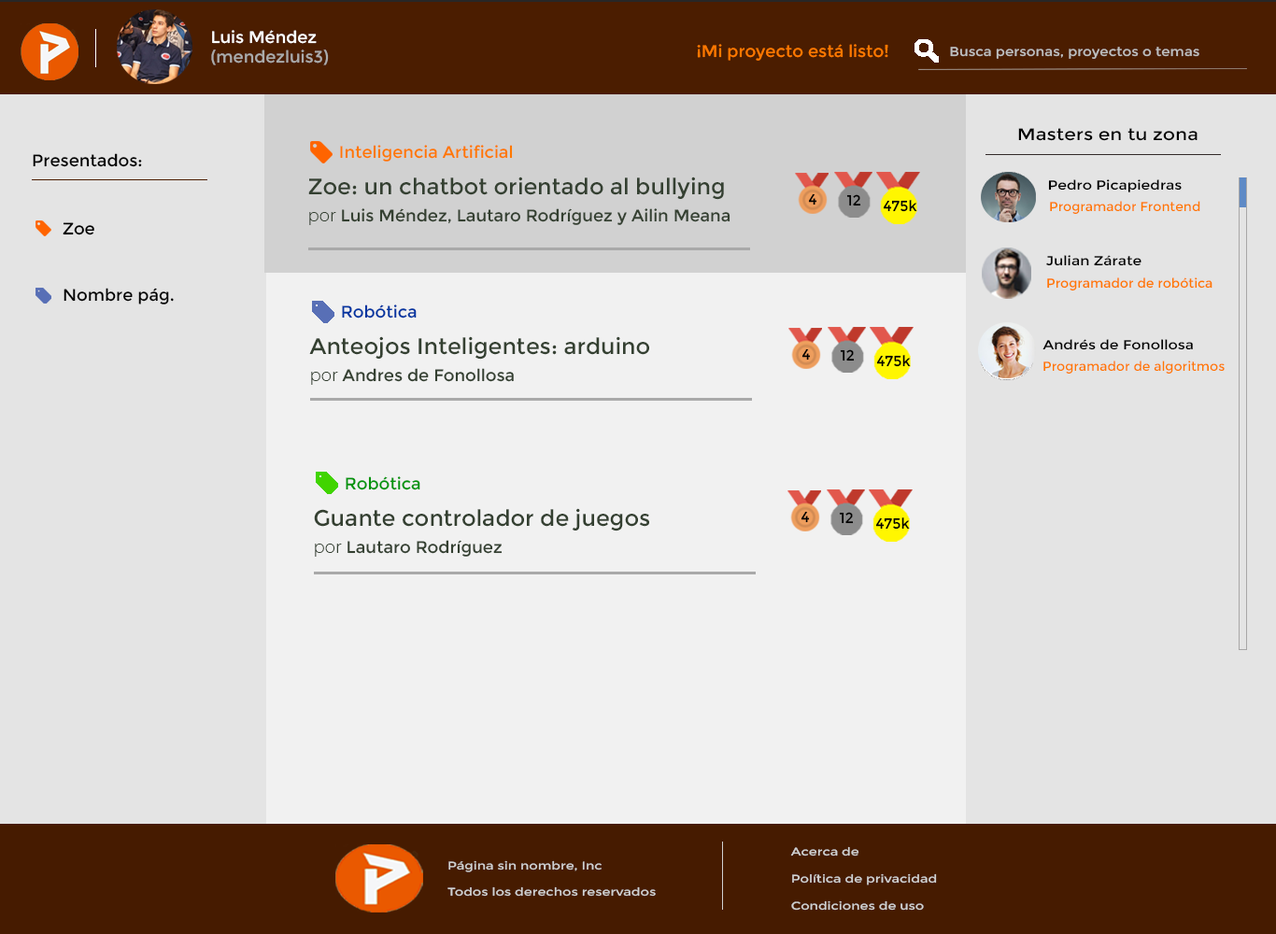
<style>
.page{position:relative;width:1276px;height:934px;background:#e4e4e4}
.page>*{position:absolute;margin:0}
.t1{font:16.8px "Montserrat-Regular";color:#ababab}
.t2{font:16.8px "Montserrat-Regular";color:#ffffff}
.t3{font:16.8px "Montserrat-Regular";color:#ff7800}
.t4{font:13.1px "Montserrat-Regular";color:#bfbfbf;scale:1.07 1}
.t5{font:16.8px "Montserrat-Regular";color:#000000;scale:1.13 1}
.t6{font:16.8px "Montserrat-Regular";color:#000000}
.t7{font:22.4px "Montserrat-Regular";color:#344031}
.t8{font:13.1px "Montserrat-Regular";color:#000000;scale:1.13 1}
.t9{font:14.7px "Montserrat-Regular";color:#000000}
.t10{font:16.8px "Montserrat-Regular";color:#344031}
.t11{font:16.8px "Montserrat-Light";color:#344031}
.t12{font:13.1px "Montserrat-Regular";color:#ff7800}
.t13{font:16.8px "Montserrat-Regular";color:#0035a1}
.t14{font:16.8px "Montserrat-Regular";color:#00940a}
.t15{font:11.2px "Montserrat-Regular";color:#d1d1d1;scale:1.2 1}
</style>
<div class="page">
<p class="t1" style="left:211px;top:30px;width:118px;height:35px"><span class="t2">Luis Méndez <br></span>(mendezluis3)</p>
<p class="t3" style="left:697px;top:44px;width:192px;height:17px">¡Mi proyecto está listo!</p>
<p class="t4" style="left:950px;top:47px;width:250px;height:12px">Busca personas, proyectos o temas</p>
<p class="t5" style="left:1018px;top:128px;width:180px;height:13px">Masters en tu zona</p>
<p class="t3" style="left:340px;top:145px;width:173px;height:17px">Inteligencia Artificial</p>
<p class="t6" style="left:33px;top:153px;width:109px;height:14px">Presentados:</p>
<p class="t7" style="left:308px;top:177px;width:416px;height:23px">Zoe: un chatbot orientado al bullying</p>
<p class="t8" style="left:1048px;top:179px;width:134px;height:13px">Pedro Picapiedras</p>
<p class="t9" style="left:808px;top:193px;width:10px;height:13px">4</p>
<p class="t9" style="left:846px;top:194px;width:15px;height:12px">12</p>
<p class="t10" style="left:309px;top:208px;width:422px;height:17px"><span class="t11">por </span>Luis Méndez, Lautaro Rodríguez y Ailin Meana</p>
<p class="t9" style="left:883px;top:200px;width:34px;height:12px">475k</p>
<p class="t12" style="left:1050px;top:201px;width:151px;height:13px">Programador Frontend</p>
<p class="t6" style="left:63px;top:222px;width:31px;height:13px">Zoe</p>
<p class="t8" style="left:1046px;top:255px;width:96px;height:11px">Julian Zárate</p>
<p class="t12" style="left:1047px;top:277px;width:166px;height:15px">Programador de robótica</p>
<p class="t6" style="left:64px;top:288px;width:110px;height:17px">Nombre pág.</p>
<p class="t13" style="left:342px;top:305px;width:75px;height:14px">Robótica</p>
<p class="t7" style="left:309px;top:336px;width:340px;height:24px">Anteojos Inteligentes: arduino</p>
<p class="t8" style="left:1043px;top:339px;width:150px;height:11px">Andrés de Fonollosa</p>
<p class="t9" style="left:802px;top:348px;width:9px;height:13px">4</p>
<p class="t9" style="left:840px;top:349px;width:15px;height:13px">12</p>
<p class="t9" style="left:876px;top:355px;width:35px;height:12px">475k</p>
<p class="t12" style="left:1044px;top:361px;width:181px;height:13px">Programador de algoritmos</p>
<p class="t10" style="left:311px;top:368px;width:203px;height:17px"><span class="t11">por </span>Andres de Fonollosa</p>
<p class="t14" style="left:346px;top:476px;width:74px;height:15px">Robótica</p>
<p class="t7" style="left:314px;top:508px;width:335px;height:24px">Guante controlador de juegos</p>
<p class="t9" style="left:801px;top:511px;width:9px;height:12px">4</p>
<p class="t9" style="left:839px;top:512px;width:15px;height:12px">12</p>
<p class="t9" style="left:875px;top:518px;width:35px;height:12px">475k</p>
<p class="t10" style="left:315px;top:540px;width:188px;height:17px"><span class="t11">por </span>Lautaro Rodríguez</p>
<p class="t15" style="left:790px;top:846px;width:147px;height:65px">Acerca de<br><br>Política de privacidad<br><br>Condiciones de uso</p>
<p class="t15" style="left:448px;top:861px;width:208px;height:36px">Página sin nombre, Inc<br><br>Todos los derechos reservados</p>
</div>
